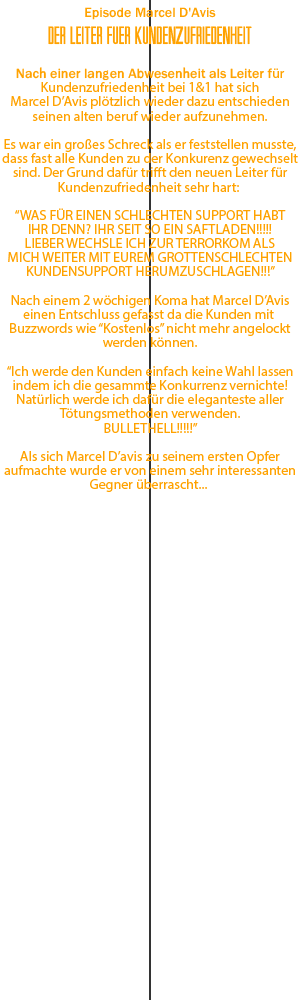
<style>
.page{position:relative;width:300px;height:1000px;background:#ffffff}
.page>*{position:absolute;margin:0}
.t1{font:14px "SW-Crawl-Body";color:#ffa200}
.t2{font:24px "SW-Crawl-Title";color:#ffa200}
.t3{font:14px/14px "MyriadPro-Regular";color:#ffa200}
.t4{font:14px/14px "SW-Crawl-Body";color:#ffa200}
</style>
<div class="page">
<p class="t1" style="left:85px;top:7px;width:131px;height:13px">Episode Marcel D'Avis</p>
<p class="t2" style="left:48px;top:26px;width:204px;height:19px">der leiter fuer kundenzufriedenheit</p>
<p class="t3" style="left:2px;top:67px;width:296px;height:425px;text-align:center"><span class="t4">Nach einer langen Abwesenheit als Leiter f</span>ür<br>Kundenzufriedenheit bei 1&amp;1 hat sich<br>Marcel D’Avis plötzlich wieder dazu entschieden<br>seinen alten beruf wieder aufzunehmen.<br><br>Es war ein großes Schreck als er feststellen musste,<br>dass fast alle Kunden zu der Konkurenz gewechselt<br>sind. Der Grund dafür trifft den neuen Leiter für<br>Kundenzufriedenheit sehr hart: <br><br>“WAS FÜR EINEN SCHLECHTEN SUPPORT HABT<br>IHR DENN? IHR SEIT SO EIN SAFTLADEN!!!!!<br>LIEBER WECHSLE ICH ZUR TERRORKOM ALS<br>MICH WEITER MIT EUREM GROTTENSCHLECHTEN<br>KUNDENSUPPORT HERUMZUSCHLAGEN!!!”<br><br>Nach einem 2 wöchigen Koma hat Marcel D’Avis<br>einen Entschluss gefasst da die Kunden mit <br>Buzzwords wie “Kostenlos” nicht mehr angelockt<br>werden können.<br><br>“Ich werde den Kunden einfach keine Wahl lassen<br>indem ich die gesammte Konkurrenz vernichte!<br>Natürlich werde ich dafür die eleganteste aller<br>Tötungsmethoden verwenden.<br>BULLETHELL!!!!!”<br><br>Als sich Marcel D’avis zu seinem ersten Opfer<br>aufmachte wurde er von einem sehr interessanten<br>Gegner überrascht...</p>
</div>
